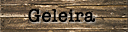
<style>
.page{position:relative;width:128px;height:32px}
.page>*{position:absolute;margin:0}
.t1{font:18px "AmericanTypewriter";color:#000000;font-weight:bold}
</style>
<div class="page">
<p class="t1" style="left:28px;top:8px;width:67px;height:15px">Geleira</p>
</div>
